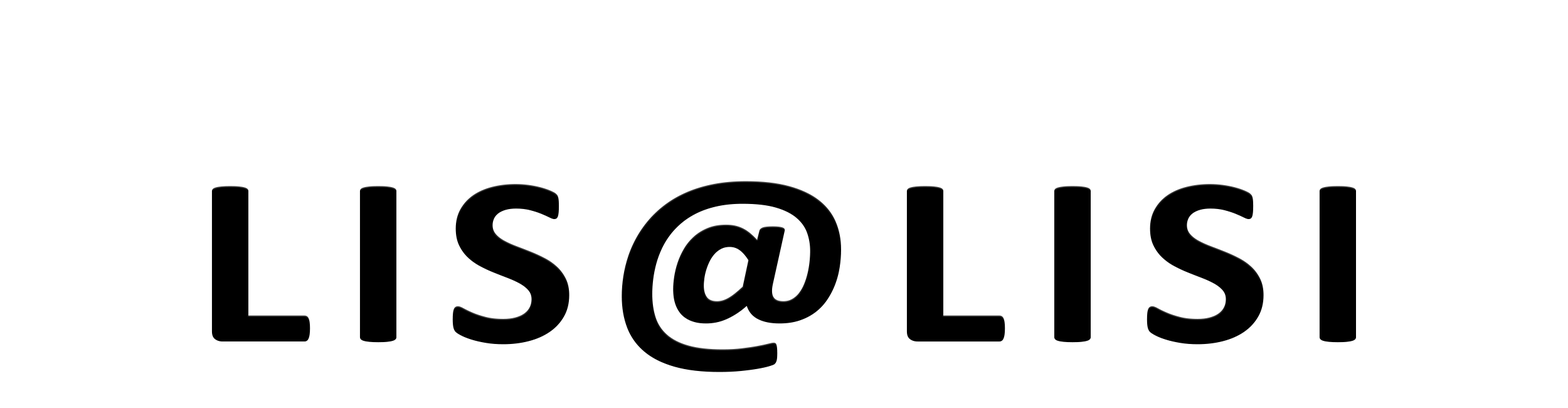
<style>
.page{position:relative;width:1568px;height:408px;background:#ffffff}
.page>*{position:absolute;margin:0}
.t1{font:244.6px "Calibri-Bold";letter-spacing:0.1em;color:#000000;scale:1.15 1}
</style>
<div class="page">
<p class="t1" style="left:211px;top:181px;width:1145px;height:191px">LIS@LISI</p>
</div>
